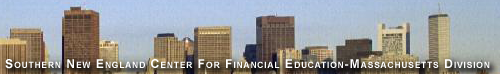
<style>
.page{position:relative;width:500px;height:74px}
.page>*{position:absolute;margin:0}
.t1{font:12px "Arial-BoldMT";letter-spacing:0.1em;color:#ffffff;font-variant:small-caps}
</style>
<div class="page">
<p class="t1" style="left:5px;top:59px;width:485px;height:10px">Southern New England Center For Financial Education-Massachusetts Division</p>
</div>
